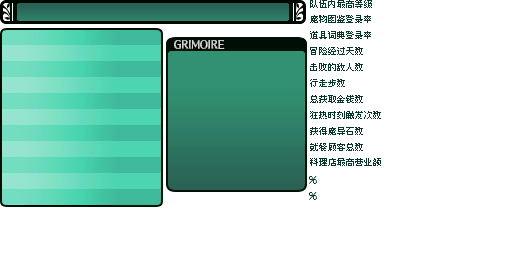
<style>
.page{position:relative;width:512px;height:256px;background:#ffffff}
.page>*{position:absolute;margin:0}
.t1{font:8.7px/16px "Zfull-GB";letter-spacing:0.105em;color:#053827}
.t2{font:8.7px/14.7px "Zfull-GB";letter-spacing:0.105em;color:#053827}
.t3{font:8.7px/15.3px "Zfull-GB";letter-spacing:0.105em;color:#053827}
</style>
<div class="page">
<p class="t1" style="left:310px;top:0px;width:71px;height:166px"><span class="t2">队伍内最高等级<br></span>魔物图鉴登录率<br>道具词典登录率<br>冒险经过天数<br>击败的敌人数<br>行走步数<br>总获取金钱数<br>狂热时刻触发次数<br>获得魔导石数<br><span class="t3">就餐顾客总数<br>料理店最高营业额</span></p>
</div>
